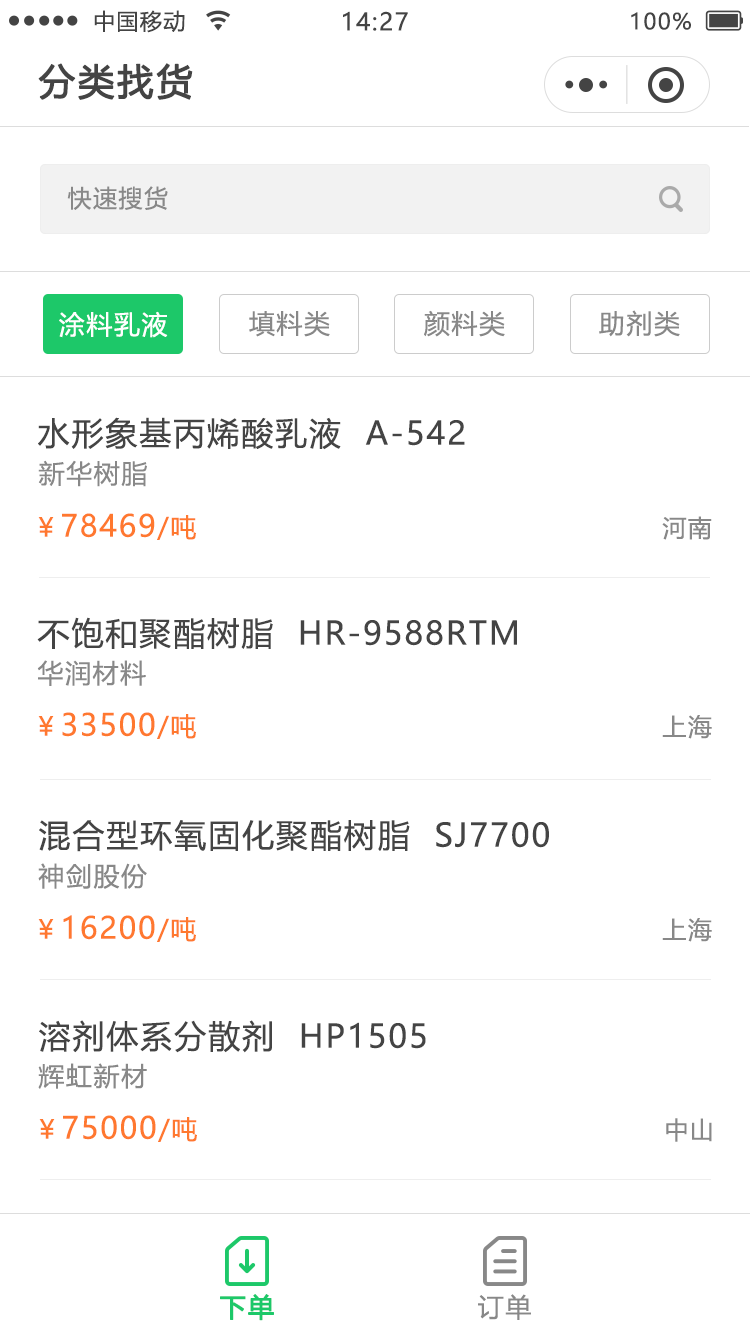
<style>
.page{position:relative;width:750px;height:1334px;background:#ffffff}
.page>*{position:absolute;margin:0}
.t1{font:22px "MicrosoftYaHeiUI";letter-spacing:0.06em;color:#444444}
.t2{font:24px "MicrosoftYaHeiUI";letter-spacing:0.06em;color:#444444}
.t3{font:36px "MicrosoftYaHeiUI";letter-spacing:0.06em;color:#444444;font-weight:bold}
.t4{font:24px "MicrosoftYaHeiUI";letter-spacing:0.06em;color:#888888}
.t5{font:26px "MicrosoftYaHeiUI";letter-spacing:0.06em;color:#ffffff}
.t6{font:26px "MicrosoftYaHeiUI";letter-spacing:0.06em;color:#888888}
.t7{font:32px "MicrosoftYaHeiUI";letter-spacing:0.06em;color:#444444}
.t8{font:30px "MicrosoftYaHeiUI";letter-spacing:0.06em;color:#ff782f}
.t9{font:26px "MicrosoftYaHeiUI";letter-spacing:0.06em;color:#ff782f}
.t10{font:26px "MicrosoftYaHeiUI";letter-spacing:0.06em;color:#1dc869;font-weight:bold}
</style>
<div class="page">
<p class="t1" style="left:94px;top:10px;width:91px;height:23px">中国移动</p>
<p class="t2" style="left:343px;top:11px;width:65px;height:20px">14:27</p>
<p class="t1" style="left:631px;top:12px;width:60px;height:18px">100%</p>
<p class="t3" style="left:38px;top:63px;width:155px;height:37px">分类找货</p>
<p class="t4" style="left:67px;top:186px;width:101px;height:24px">快速搜货</p>
<p class="t5" style="left:59px;top:311px;width:109px;height:27px">涂料乳液</p>
<p class="t6" style="left:249px;top:311px;width:81px;height:26px">填料类</p>
<p class="t6" style="left:424px;top:310px;width:81px;height:27px">颜料类</p>
<p class="t6" style="left:599px;top:310px;width:81px;height:27px">助剂类</p>
<p class="t7" style="left:38px;top:417px;width:427px;height:33px">水形象基丙烯酸乳液  A-542</p>
<p class="t6" style="left:38px;top:460px;width:109px;height:27px">新华树脂</p>
<p class="t8" style="left:38px;top:513px;width:158px;height:27px"><span class="t9">￥</span>78469<span class="t9">/吨</span></p>
<p class="t4" style="left:662px;top:516px;width:50px;height:24px">河南</p>
<p class="t7" style="left:37px;top:617px;width:480px;height:32px">不饱和聚酯树脂  HR-9588RTM</p>
<p class="t6" style="left:37px;top:660px;width:109px;height:26px">华润材料</p>
<p class="t8" style="left:38px;top:712px;width:158px;height:27px"><span class="t9">￥</span>33500<span class="t9">/吨</span></p>
<p class="t4" style="left:662px;top:715px;width:50px;height:24px">上海</p>
<p class="t7" style="left:39px;top:820px;width:510px;height:32px">混合型环氧固化聚酯树脂  SJ7700</p>
<p class="t6" style="left:38px;top:863px;width:109px;height:26px">神剑股份</p>
<p class="t8" style="left:38px;top:915px;width:158px;height:27px"><span class="t9">￥</span>16200<span class="t9">/吨</span></p>
<p class="t4" style="left:662px;top:918px;width:50px;height:24px">上海</p>
<p class="t7" style="left:39px;top:1020px;width:387px;height:33px">溶剂体系分散剂  HP1505</p>
<p class="t6" style="left:38px;top:1063px;width:109px;height:26px">辉虹新材</p>
<p class="t8" style="left:39px;top:1115px;width:158px;height:27px"><span class="t9">￥</span>75000<span class="t9">/吨</span></p>
<p class="t4" style="left:666px;top:1118px;width:46px;height:24px">中山</p>
<p class="t10" style="left:220px;top:1294px;width:54px;height:27px">下单</p>
<p class="t6" style="left:478px;top:1294px;width:53px;height:26px">订单</p>
</div>
